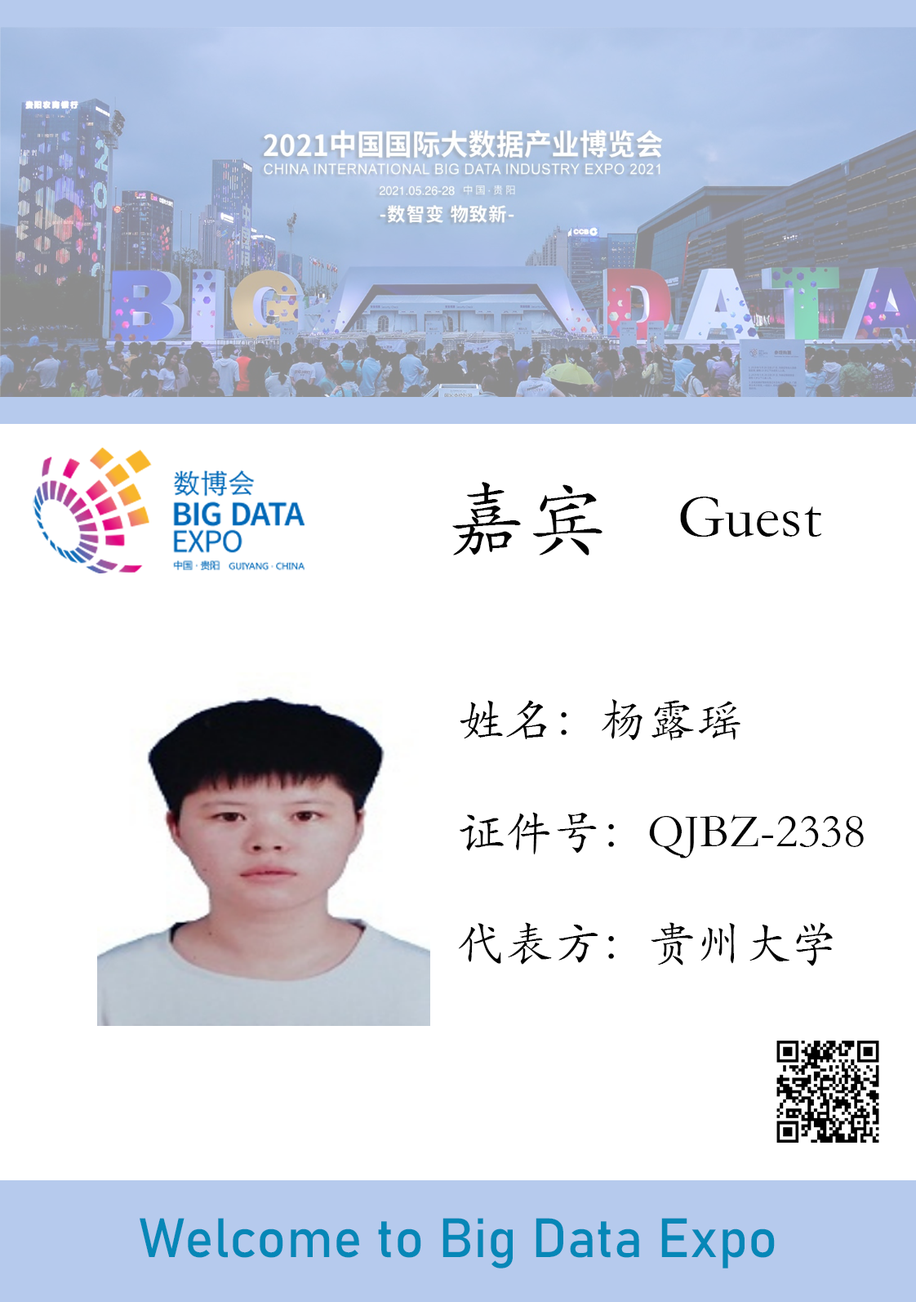
<style>
.page{position:relative;width:916px;height:1302px;background:#ffffff}
.page>*{position:absolute;margin:0}
.t1{font:81.7px "STKaiti";color:#030303}
.t2{font:61.2px "STKaiti";color:#030303}
.t3{font:47.6px/37.4px "STKaiti";color:#030303}
.t4{font:54.4px "Bahnschrift";color:#0687b7}
</style>
<div class="page">
<p class="t1" style="left:452px;top:482px;width:151px;height:73px">嘉宾</p>
<p class="t2" style="left:680px;top:496px;width:142px;height:41px">Guest</p>
<p class="t3" style="left:458px;top:699px;width:406px;height:267px">姓名：杨露瑶<br><br><br>证件号：QJBZ-2338<br><br><br>代表方：贵州大学</p>
<p class="t4" style="left:140px;top:1217px;width:635px;height:51px">Welcome to Big Data Expo</p>
</div>
